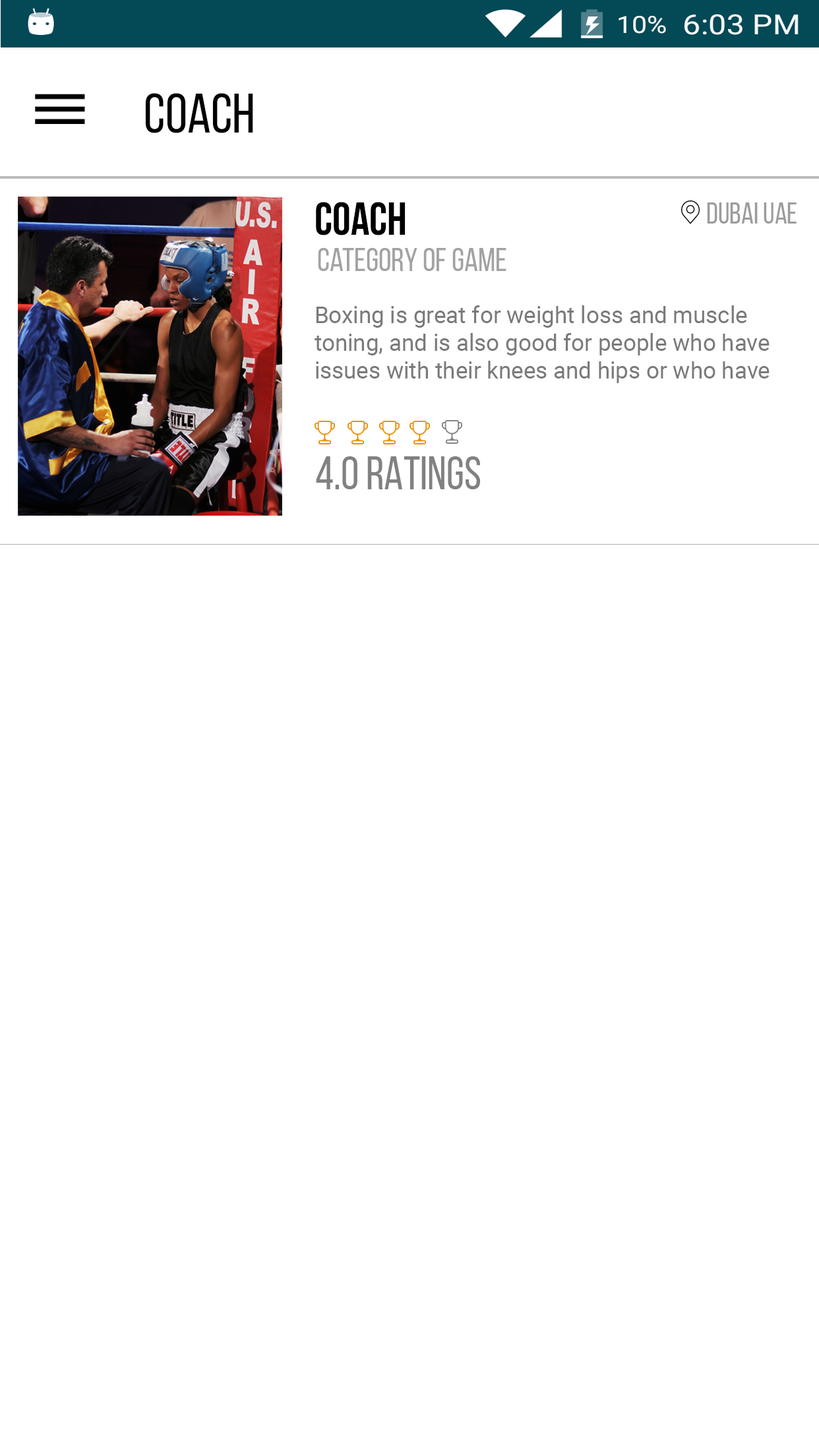
<style>
.page{position:relative;width:819px;height:1456px;background:#ffffff}
.page>*{position:absolute;margin:0}
.t1{font:56px "BebasNeueRegular";color:#010101}
.t2{font:46.2px "TestN-TestNBold";color:#000000}
.t3{font:29.7px "TestN-TestNRegular";color:#9d9c9c}
.t4{font:33px "TestN-TestNRegular";color:#a3a2a2}
.t5{font:23.1px "Roboto-Regular";color:#7b7979}
.t6{font:46.2px "TestN-TestNRegular";color:#828181}
</style>
<div class="page">
<p class="t1" style="left:145px;top:93px;width:108px;height:40px">COACH</p>
<p class="t2" style="left:316px;top:202px;width:90px;height:33px">COACH</p>
<p class="t3" style="left:707px;top:202px;width:90px;height:22px">DUBAI UAE</p>
<p class="t4" style="left:318px;top:248px;width:188px;height:23px">category of game</p>
<p class="t5" style="left:315px;top:305px;width:455px;height:78px">Boxing is great for weight loss and muscle <br>toning, and is also good for people who have <br>issues with their knees and hips or who have</p>
<p class="t6" style="left:316px;top:456px;width:165px;height:33px">4.0 RATINGS</p>
</div>
